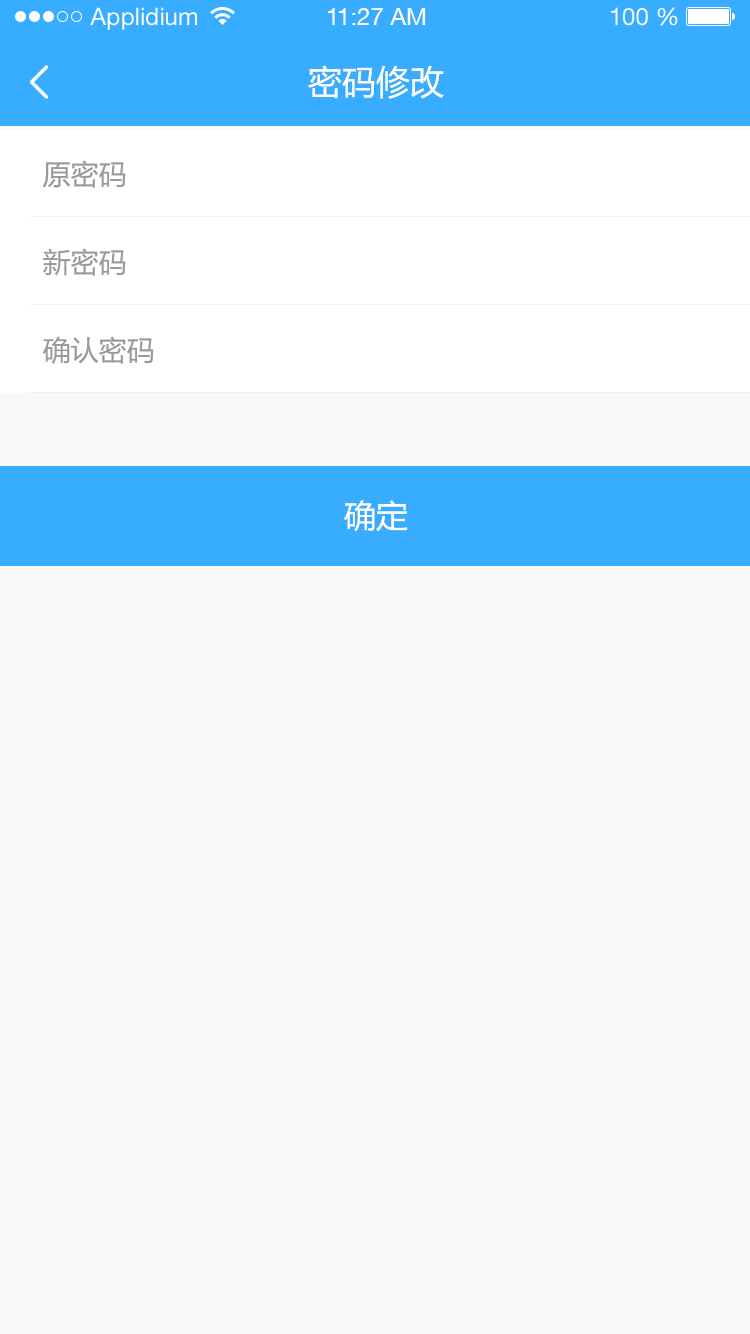
<style>
.page{position:relative;width:750px;height:1334px;background:#f8f8f8}
.page>*{position:absolute;margin:0}
.t1{font:24px "HelveticaNeueLTStd-Roman";color:#ffffff}
.t2{font:24px "HelveticaNeueCE-Roman";color:#ffffff}
.t3{font:34px "MicrosoftYaHei";color:#ffffff}
.t4{font:28px "MicrosoftYaHei";color:#999999}
.t5{font:32px "MicrosoftYaHei";color:#ffffff}
</style>
<div class="page">
<p class="t1" style="left:90px;top:7px;width:107px;height:23px">Applidium</p>
<p class="t2" style="left:328px;top:8px;width:98px;height:17px">11:27 AM</p>
<p class="t1" style="left:611px;top:7px;width:67px;height:19px">100 %</p>
<p class="t3" style="left:308px;top:65px;width:136px;height:34px">密码修改</p>
<p class="t4" style="left:43px;top:160px;width:83px;height:28px">原密码</p>
<p class="t4" style="left:43px;top:248px;width:83px;height:28px">新密码</p>
<p class="t4" style="left:42px;top:336px;width:112px;height:28px">确认密码</p>
<p class="t5" style="left:344px;top:500px;width:64px;height:32px">确定</p>
</div>
